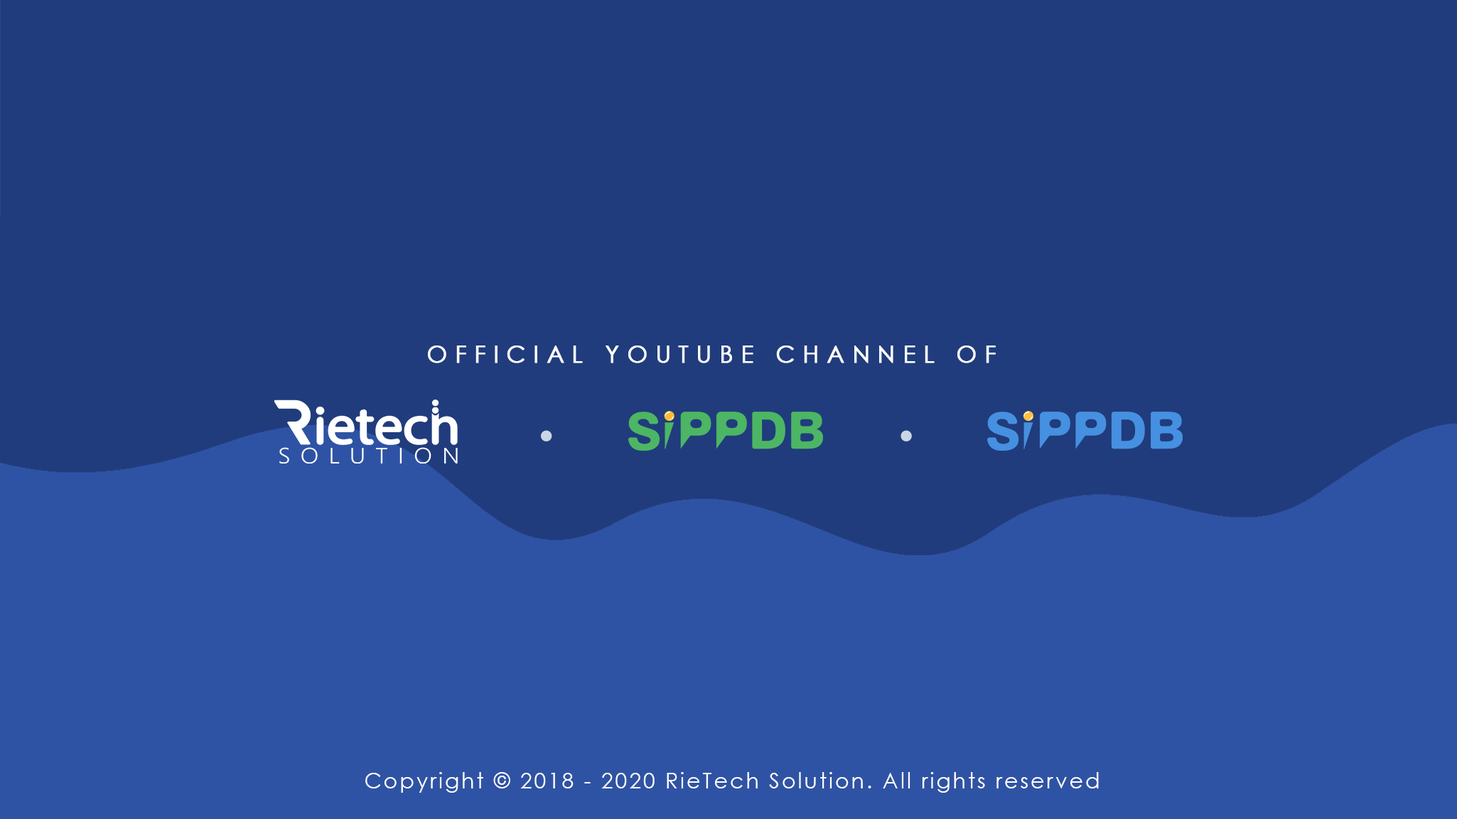
<style>
.page{position:relative;width:1457px;height:819px;background:#203c7c}
.page>*{position:absolute;margin:0}
.t1{font:23.8px "CenturyGothic";letter-spacing:0.3em;color:#ffffff;font-weight:bold}
.t2{font:21.3px "CenturyGothic";letter-spacing:0.1em;color:#ffffff}
</style>
<div class="page">
<p class="t1" style="left:428px;top:345px;width:568px;height:18px">OFFICIAL YOUTUBE CHANNEL OF</p>
<p class="t2" style="left:365px;top:772px;width:734px;height:20px">Copyright © 2018 - 2020 RieTech Solution. All rights reserved</p>
</div>
